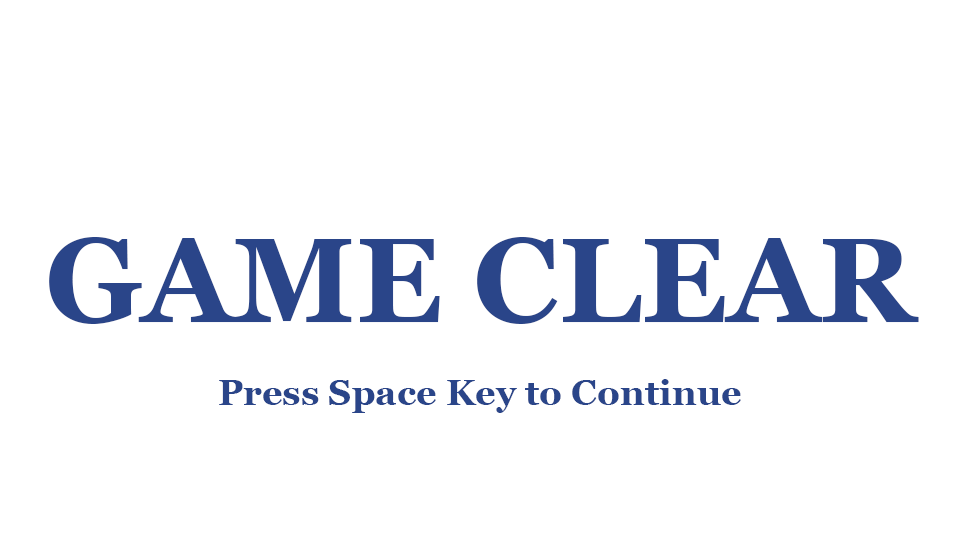
<style>
.page{position:relative;width:960px;height:540px;background:#ffffff}
.page>*{position:absolute;margin:0}
.t1{font:120px "Georgia-Bold";color:#2a4589}
.t2{font:36px "Georgia-Bold";color:#2a4589}
</style>
<div class="page">
<p class="t1" style="left:49px;top:237px;width:870px;height:87px">GAME CLEAR</p>
<p class="t2" style="left:219px;top:379px;width:522px;height:34px">Press Space Key to Continue</p>
</div>
